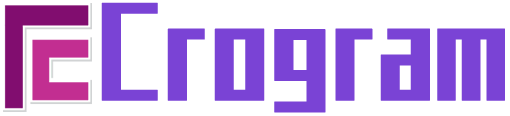
<style>
.page{position:relative;width:510px;height:116px;background:#ffffff}
.page>*{position:absolute;margin:0}
.t1{font:131.1px "RuixianTopHeiHeavyGB1.0";letter-spacing:-0.077em;color:#7a43d5;font-weight:bold;scale:0.72 1}
</style>
<div class="page">
<p class="t1" style="left:101px;top:2px;width:404px;height:111px">Crogram</p>
</div>
